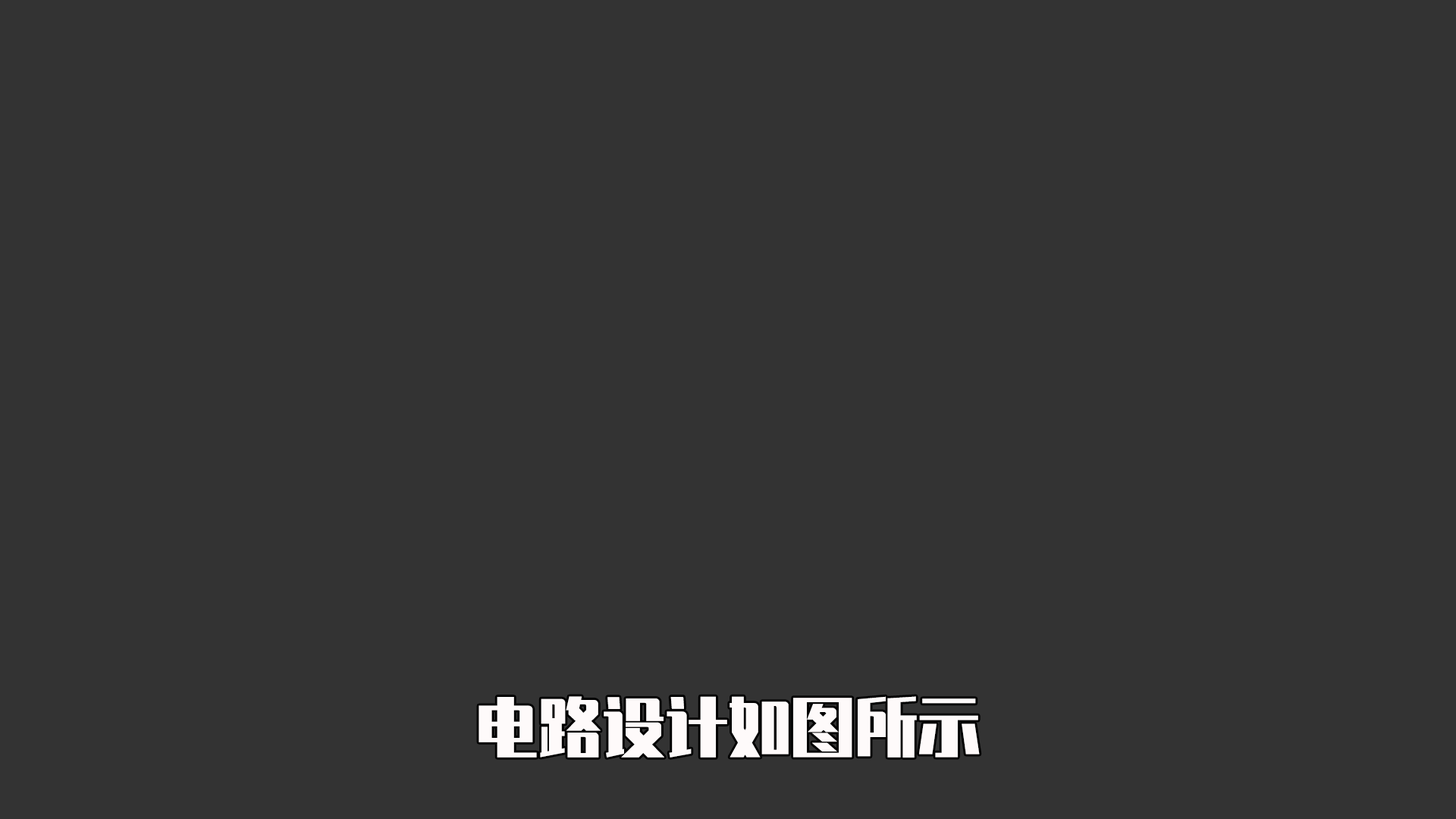
<style>
.page{position:relative;width:1456px;height:819px;background:#333333}
.page>*{position:absolute;margin:0}
.t1{font:63.2px "ZhenyanGB-Regular";color:#fefafa}
</style>
<div class="page">
<p class="t1" style="left:479px;top:696px;width:501px;height:62px">电路设计如图所示</p>
</div>
